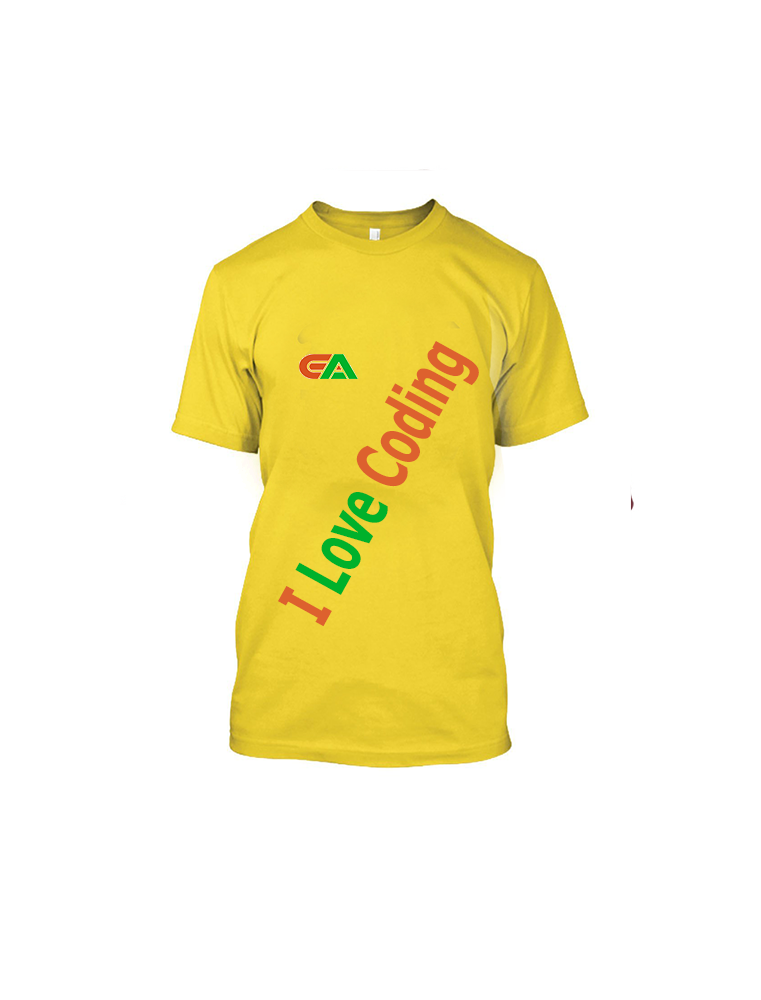
<style>
.page{position:relative;width:761px;height:1000px;background:#ffffff}
.page>*{position:absolute;margin:0}
.t1{font:71.8px "Tahoma-Bold";color:#dd612e;scale:0.62 1}
.t2{font:71.8px "Tahoma-Bold";color:#00b12b;scale:0.62 1}
</style>
<div class="page">
<p class="t1" style="left:278px;top:341px;width:201px;height:286px;rotate:-61deg">I <span class="t2">Love</span> Coding</p>
</div>
